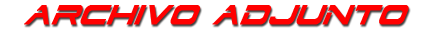
<style>
.page{position:relative;width:438px;height:29px;background:#ffffff}
.page>*{position:absolute;margin:0}
.t1{font:31.9px "DodgerCondensedItalic";color:#ff0000;font-weight:bold}
</style>
<div class="page">
<p class="t1" style="left:24px;top:5px;width:385px;height:20px">ARCHIVO ADJUNTO</p>
</div>
